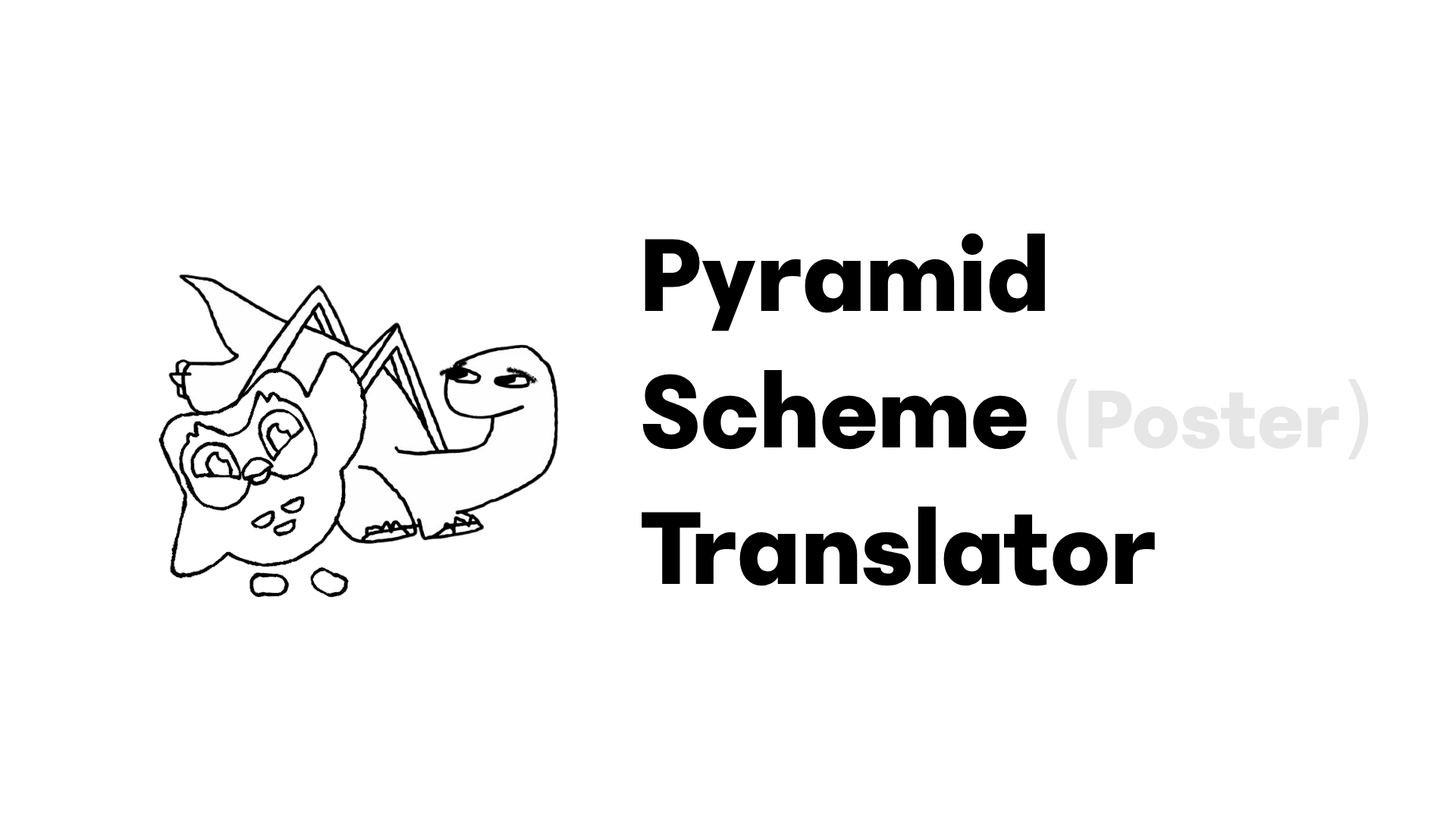
<style>
.page{position:relative;width:1456px;height:819px;background:#ffffff}
.page>*{position:absolute;margin:0}
.t1{font:113.7px "TRIALPhantomSans0.8-Bold";color:#000000}
.t2{font:90.2px "DejaVuSans";color:#e6e6e6}
.t3{font:90.2px "TRIALPhantomSans0.8-Bold";color:#e6e6e6}
</style>
<div class="page">
<p class="t1" style="left:642px;top:233px;width:727px;height:353px">Pyramid<br>Scheme <span class="t2">(</span><span class="t3">Poster</span><span class="t2">)  </span>Translator</p>
</div>
